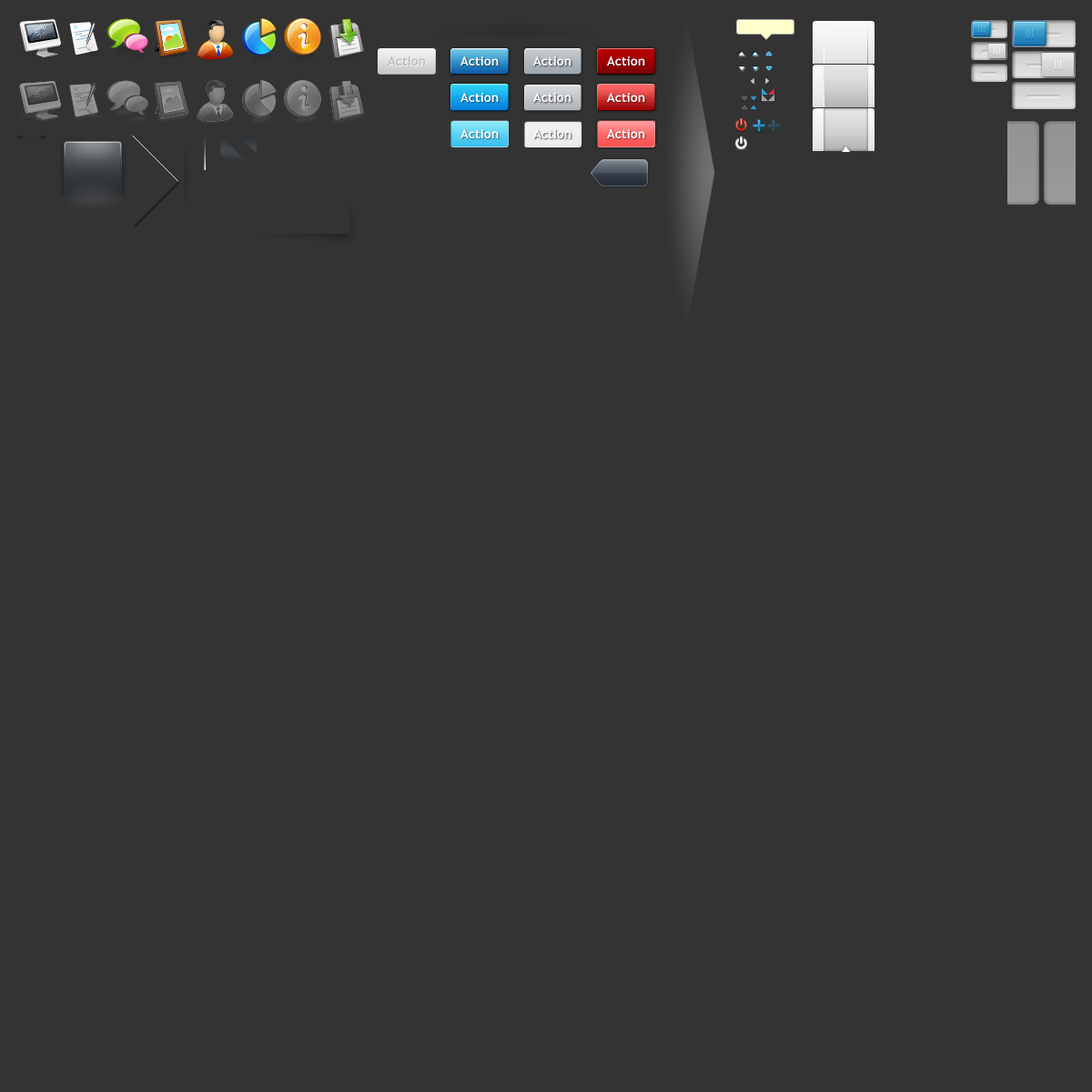
<style>
.page{position:relative;width:1092px;height:1092px;background:#333333}
.page>*{position:absolute;margin:0}
.t1{font:12.7px "TrebuchetMS-Bold";color:#bfbfbf}
.t2{font:12.7px "TrebuchetMS-Bold";color:#fffefe}
</style>
<div class="page">
<p class="t1" style="left:388px;top:56px;width:38px;height:10px">Action</p>
<p class="t2" style="left:460px;top:56px;width:39px;height:10px">Action</p>
<p class="t2" style="left:533px;top:56px;width:38px;height:10px">Action</p>
<p class="t2" style="left:607px;top:56px;width:38px;height:10px">Action</p>
<p class="t2" style="left:460px;top:93px;width:39px;height:9px">Action</p>
<p class="t2" style="left:533px;top:93px;width:38px;height:9px">Action</p>
<p class="t2" style="left:607px;top:93px;width:38px;height:9px">Action</p>
<p class="t2" style="left:460px;top:129px;width:39px;height:9px">Action</p>
<p class="t2" style="left:533px;top:129px;width:38px;height:9px">Action</p>
<p class="t2" style="left:607px;top:129px;width:38px;height:9px">Action</p>
</div>
